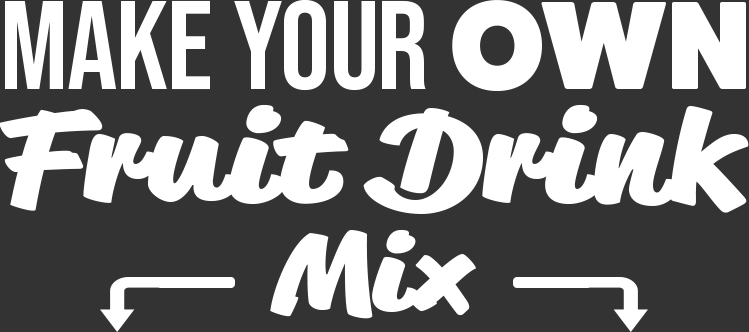
<style>
.page{position:relative;width:749px;height:332px;background:#333333}
.page>*{position:absolute;margin:0}
.t1{font:126.3px "BebasNeue-Regular";color:#ffffff;text-transform:uppercase}
.t2{font:126.3px "FatFrank-Heavy";color:#ffffff;text-transform:uppercase}
.t3{font:123.9px/119px "ReklameScript-Black";color:#ffffff}
.t4{font:123.9px/119px "ReklameScript-Black";color:#ffffff;text-transform:uppercase}
.t5{font:103.3px/109px "ReklameScript-Black";color:#ffffff}
</style>
<div class="page">
<p class="t1" style="left:5px;top:0px;width:741px;height:92px">mAKE yOUR <span class="t2">OWN</span></p>
<p class="t3" style="left:0px;top:104px;width:749px;height:215px;text-align:center"><span class="t4">F</span>ruit Drink<br><span class="t5">Mix</span></p>
</div>
